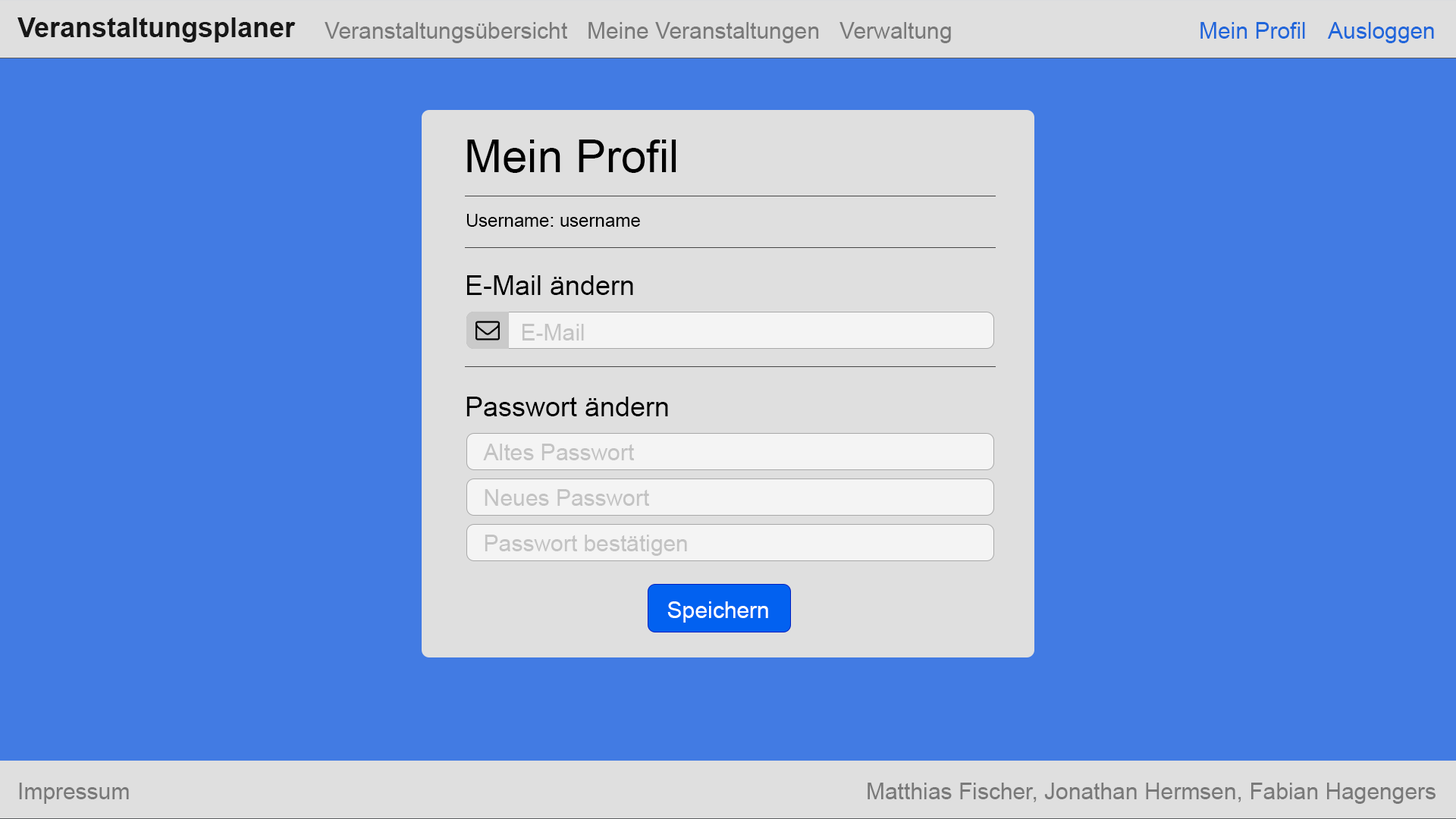
<style>
.page{position:relative;width:1456px;height:819px;background:#427be3}
.page>*{position:absolute;margin:0}
.t1{font:27.3px "Arial-BoldMT";color:#171717}
.t2{font:22.7px "ArialMT";color:#797979}
.t3{font:22.7px "ArialMT";color:#2066da}
.t4{font:45.5px "ArialMT";color:#000000}
.t5{font:18.2px "ArialMT";color:#000000}
.t6{font:27.3px "ArialMT";color:#000000}
.t7{font:22.7px "ArialMT";color:#c3c3c3}
.t8{font:22.7px "ArialMT";color:#ffffff}
</style>
<div class="page">
<p class="t1" style="left:17px;top:17px;width:279px;height:25px">Veranstaltungsplaner</p>
<p class="t2" style="left:325px;top:22px;width:242px;height:21px">Veranstaltungsübersicht</p>
<p class="t2" style="left:588px;top:22px;width:231px;height:21px">Meine Veranstaltungen</p>
<p class="t2" style="left:839px;top:22px;width:112px;height:21px">Verwaltung</p>
<p class="t3" style="left:1200px;top:22px;width:105px;height:17px">Mein Profil</p>
<p class="t3" style="left:1327px;top:22px;width:107px;height:21px">Ausloggen</p>
<p class="t4" style="left:467px;top:140px;width:209px;height:33px">Mein Profil</p>
<p class="t5" style="left:466px;top:214px;width:174px;height:13px">Username: username</p>
<p class="t6" style="left:467px;top:275px;width:166px;height:20px">E-Mail ändern</p>
<p class="t7" style="left:522px;top:324px;width:62px;height:16px">E-Mail</p>
<p class="t6" style="left:466px;top:397px;width:202px;height:19px">Passwort ändern</p>
<p class="t7" style="left:483px;top:444px;width:151px;height:16px">Altes Passwort</p>
<p class="t7" style="left:485px;top:489px;width:164px;height:17px">Neues Passwort</p>
<p class="t7" style="left:485px;top:535px;width:202px;height:21px">Passwort bestätigen</p>
<p class="t8" style="left:667px;top:601px;width:101px;height:22px">Speichern</p>
<p class="t2" style="left:19px;top:783px;width:110px;height:21px">Impressum</p>
<p class="t2" style="left:868px;top:783px;width:568px;height:21px">Matthias Fischer, Jonathan Hermsen, Fabian Hagengers</p>
</div>
